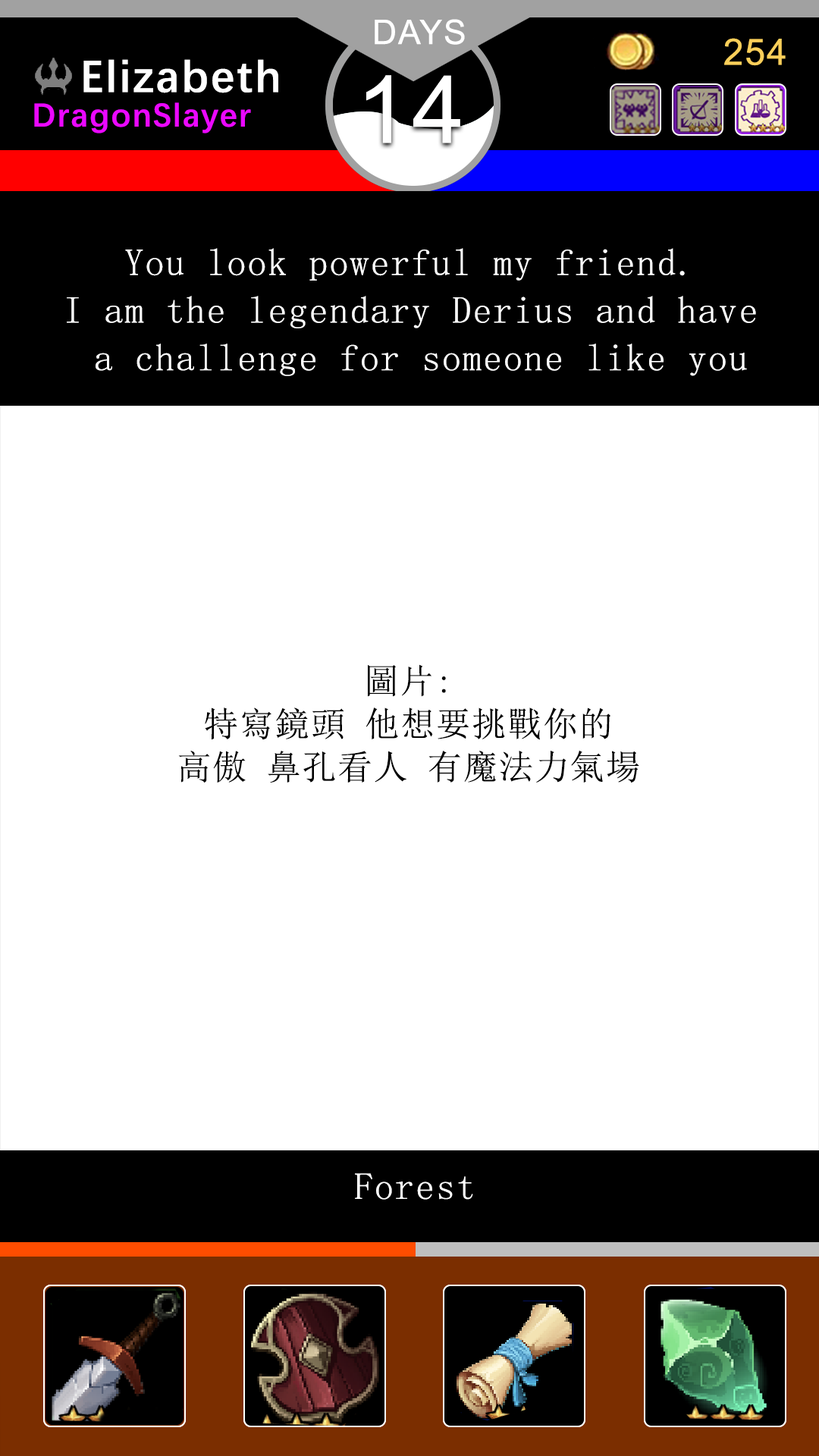
<style>
.page{position:relative;width:819px;height:1456px;background:#ffffff}
.page>*{position:absolute;margin:0}
.t1{font:37.9px/47.6px "SimSun";letter-spacing:0.04em;color:#ffffff}
.t2{font:34.3px/43.1px "SimSun";letter-spacing:0.04em;color:#000000}
.t3{font:37.9px "SimSun";letter-spacing:0.04em;color:#ffffff}
</style>
<div class="page">
<p class="t1" style="left:67px;top:248px;width:689px;height:128px;text-align:center">You look powerful my friend. <br>I am the legendary Derius and have <br>a challenge for someone like you</p>
<p class="t2" style="left:178px;top:664px;width:461px;height:119px;text-align:center">圖片:<br>特寫鏡頭 他想要挑戰你的<br>高傲 鼻孔看人 有魔法力氣場</p>
<p class="t3" style="left:355px;top:1173px;width:118px;height:27px">Forest</p>
</div>
